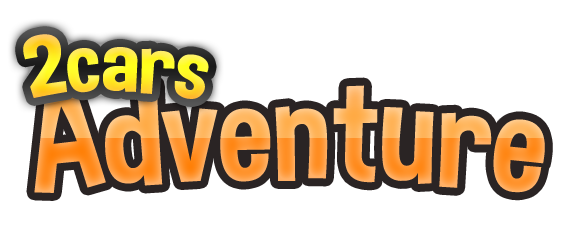
<style>
.page{position:relative;width:572px;height:239px;background:#ffffff}
.page>*{position:absolute;margin:0}
.t1{font:87px "DimboRegular"}
.t2{font:145.1px "DimboRegular"}
</style>
<div class="page">
<p class="t1" style="left:23px;top:34px;width:186px;height:65px">2cars</p>
<p class="t2" style="left:34px;top:84px;width:511px;height:109px">Adventure</p>
</div>
